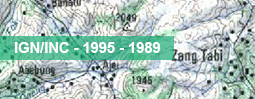
<style>
.page{position:relative;width:255px;height:99px}
.page>*{position:absolute;margin:0}
.t1{font:14.6px "Arial-BoldMT";color:#ffffff}
</style>
<div class="page">
<p class="t1" style="left:14px;top:42px;width:147px;height:11px">IGN/INC - 1995 - 1989</p>
</div>
